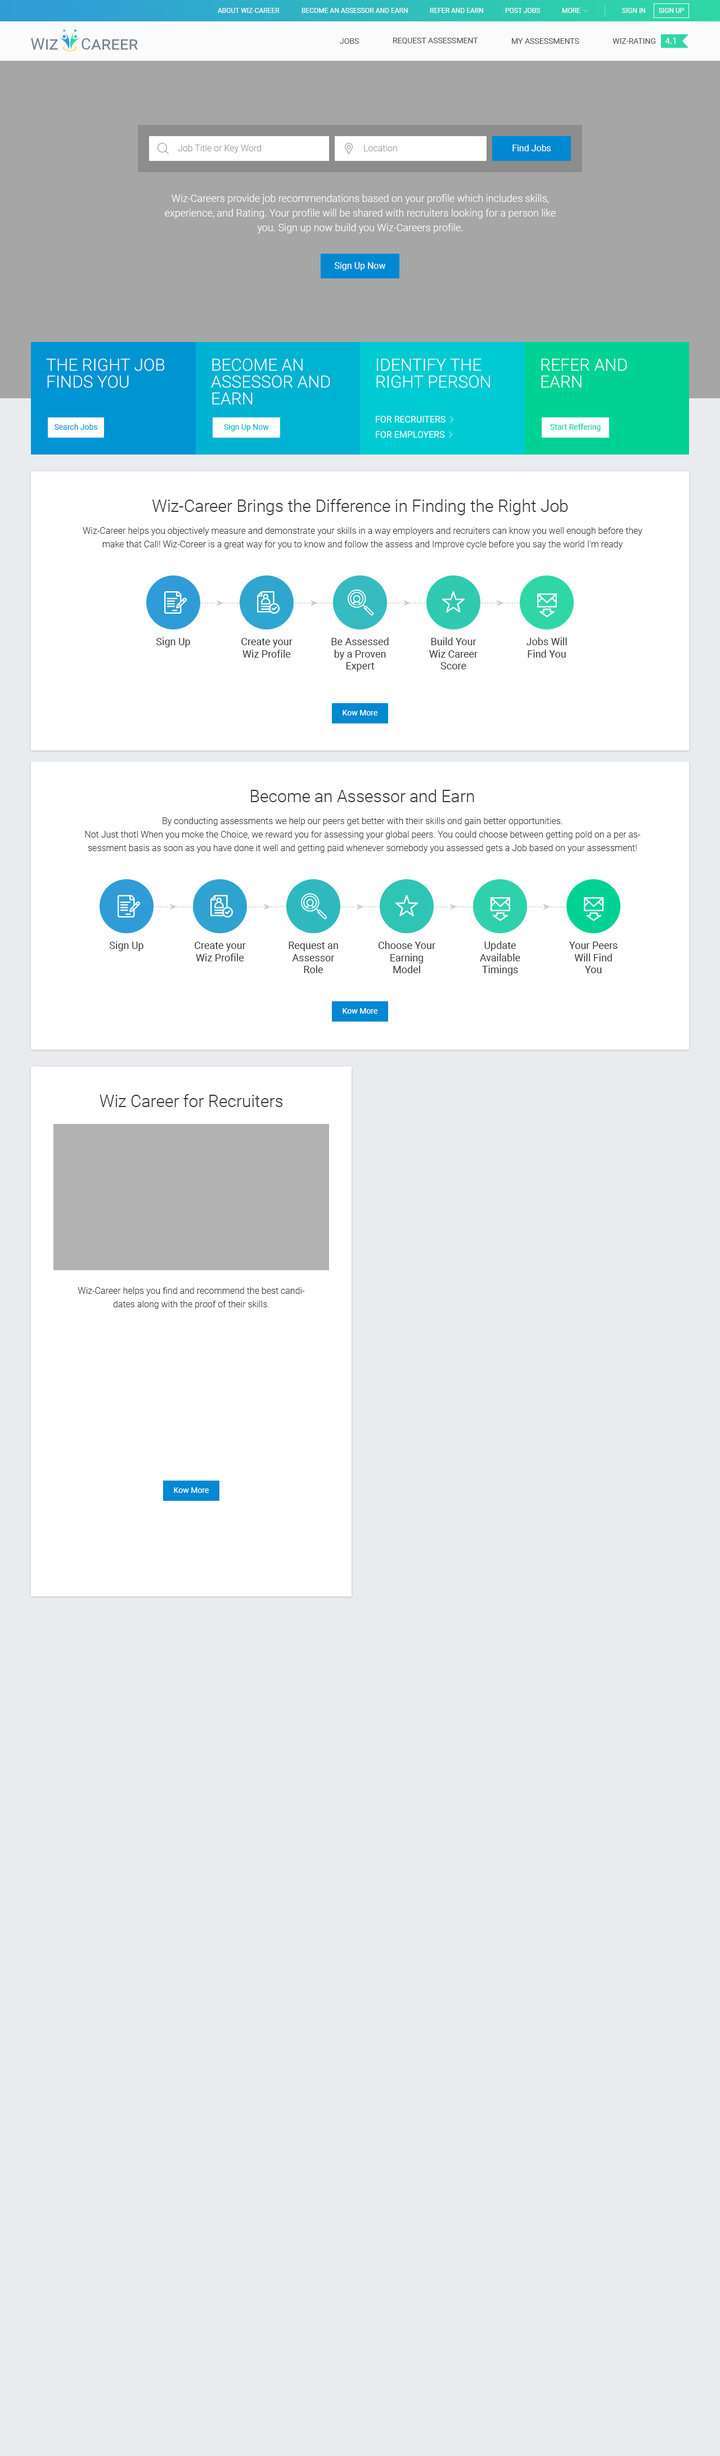
<style>
.page{position:relative;width:720px;height:2456px;background:#e9ebee}
.page>*{position:absolute;margin:0}
.t1{font:6.8px "Roboto-Regular";color:#ffffff;text-transform:uppercase}
.t2{font:7.9px "Roboto-Regular";color:#575858;text-transform:uppercase}
.t3{font:8.4px "Roboto-Regular";color:#ffffff;text-transform:uppercase}
.t4{font:9px "Roboto-Light";color:#999999}
.t5{font:9px "Roboto-Regular";color:#ffffff}
.t6{font:10.1px/14.6px "Roboto-Light";color:#ffffff}
.t7{font:16.9px/16.9px "Roboto-Light";color:#ffffff;text-transform:uppercase}
.t8{font:7.9px "Roboto-Regular";color:#0094d2}
.t9{font:7.9px "Roboto-Regular";color:#00b2d2}
.t10{font:9px "Roboto-Regular";color:#ffffff;text-transform:uppercase}
.t11{font:7.9px "Roboto-Regular";color:#00d294}
.t12{font:16.9px "Roboto-Light";color:#333333}
.t13{font:9px/13.5px "Roboto-Light";color:#333333}
.t14{font:10.1px "Roboto-Regular";color:#333333}
.t15{font:7.9px "Roboto-Regular";color:#ffffff}
</style>
<div class="page">
<p class="t1" style="left:218px;top:8px;width:62px;height:5px">About Wiz-Career</p>
<p class="t1" style="left:302px;top:8px;width:106px;height:5px">Become an Assessor and Earn</p>
<p class="t1" style="left:430px;top:8px;width:53px;height:5px">Refer and Earn</p>
<p class="t1" style="left:505px;top:8px;width:35px;height:5px">Post Jobs</p>
<p class="t1" style="left:562px;top:8px;width:18px;height:5px">More</p>
<p class="t1" style="left:622px;top:8px;width:23px;height:5px">Sign In</p>
<p class="t1" style="left:659px;top:8px;width:25px;height:5px">Sign Up</p>
<p class="t2" style="left:340px;top:38px;width:19px;height:6px">Jobs</p>
<p class="t2" style="left:393px;top:38px;width:85px;height:6px">Request Assessment</p>
<p class="t2" style="left:512px;top:38px;width:67px;height:6px">My Assessments</p>
<p class="t2" style="left:613px;top:38px;width:43px;height:6px">Wiz-Rating</p>
<p class="t3" style="left:665px;top:38px;width:11px;height:6px">4.1</p>
<p class="t4" style="left:178px;top:145px;width:83px;height:8px">Job Title or Key Word</p>
<p class="t4" style="left:364px;top:145px;width:33px;height:6px">Location</p>
<p class="t5" style="left:512px;top:145px;width:39px;height:6px">Find Jobs</p>
<p class="t6" style="left:165px;top:194px;width:391px;height:39px;text-align:center">Wiz-Careers provide job recommendations based on your profile which includes skills, experience, and Rating. Your profile will be shared with recruiters looking for a person like you. Sign up now build you Wiz-Careers profile.</p>
<p class="t5" style="left:335px;top:262px;width:51px;height:9px">Sign Up Now</p>
<p class="t7" style="left:46px;top:358px;width:118px;height:30px">The Right Job<br>Finds You</p>
<p class="t7" style="left:211px;top:358px;width:119px;height:46px">Become an<br>Assessor and<br>Earn</p>
<p class="t7" style="left:376px;top:358px;width:114px;height:30px">Identify the<br>Right Person</p>
<p class="t7" style="left:541px;top:358px;width:86px;height:30px">Refer and <br>Earn</p>
<p class="t8" style="left:54px;top:424px;width:44px;height:6px">Search Jobs</p>
<p class="t9" style="left:224px;top:424px;width:45px;height:7px">Sign Up Now</p>
<p class="t10" style="left:376px;top:416px;width:70px;height:7px">For Recruiters</p>
<p class="t11" style="left:550px;top:424px;width:51px;height:7px">Start Reffering</p>
<p class="t10" style="left:376px;top:431px;width:69px;height:7px">For Employers</p>
<p class="t12" style="left:152px;top:499px;width:416px;height:16px">Wiz-Career Brings the Difference in Finding the Right Job</p>
<p class="t13" style="left:83px;top:527px;width:559px;height:22px;text-align:center">Wiz-Career helps you objectively measure and demonstrate your skills in a way employers and recruiters can know you well enough before they make that Call! Wiz-Coreer is a great way for you to know and follow the assess and Improve cycle before you say the world I'm ready</p>
<p class="t14" style="left:156px;top:637px;width:34px;height:10px">Sign Up</p>
<p class="t14" style="left:241px;top:638px;width:51px;height:20px;text-align:center">Create your<br>Wiz Profile</p>
<p class="t14" style="left:331px;top:637px;width:58px;height:35px;text-align:center">Be Assessed<br>by a Proven<br>Expert</p>
<p class="t14" style="left:429px;top:637px;width:49px;height:32px;text-align:center">Build Your<br>Wiz Career<br>Score</p>
<p class="t14" style="left:526px;top:637px;width:41px;height:21px;text-align:center">Jobs Will<br>Find You</p>
<p class="t15" style="left:343px;top:710px;width:34px;height:6px">Kow More</p>
<p class="t12" style="left:251px;top:789px;width:223px;height:13px">Become an Assessor and Earn</p>
<p class="t13" style="left:85px;top:817px;width:556px;height:36px;text-align:center">By conducting assessments we help our peers get better with their skills ond gain better opportunities. <br>Not Just thotl When you moke the Choice, we reward you for assessing your global peers. You could choose between getting pold on a per assessment basis as soon as you have done it well and getting paid whenever somebody you assessed gets a Job based on your assessment!</p>
<p class="t14" style="left:109px;top:941px;width:34px;height:10px">Sign Up</p>
<p class="t14" style="left:195px;top:942px;width:51px;height:19px;text-align:center">Create your<br>Wiz Profile</p>
<p class="t14" style="left:289px;top:942px;width:49px;height:31px;text-align:center">Request an<br>Assessor<br>Role</p>
<p class="t14" style="left:378px;top:941px;width:57px;height:32px;text-align:center">Choose Your<br>Earning<br>Model</p>
<p class="t14" style="left:480px;top:941px;width:40px;height:34px;text-align:center">Update<br>Available<br>Timings</p>
<p class="t14" style="left:569px;top:942px;width:49px;height:31px;text-align:center">Your Peers<br>Will Find<br>You</p>
<p class="t15" style="left:343px;top:1008px;width:34px;height:6px">Kow More</p>
<p class="t12" style="left:100px;top:1094px;width:183px;height:13px">Wiz Career for Recruiters</p>
<p class="t13" style="left:78px;top:1287px;width:227px;height:22px;text-align:center">Wiz-Career helps you find and recommend the best candidates along with the proof of their skills.</p>
<p class="t15" style="left:174px;top:1487px;width:35px;height:6px">Kow More</p>
</div>
